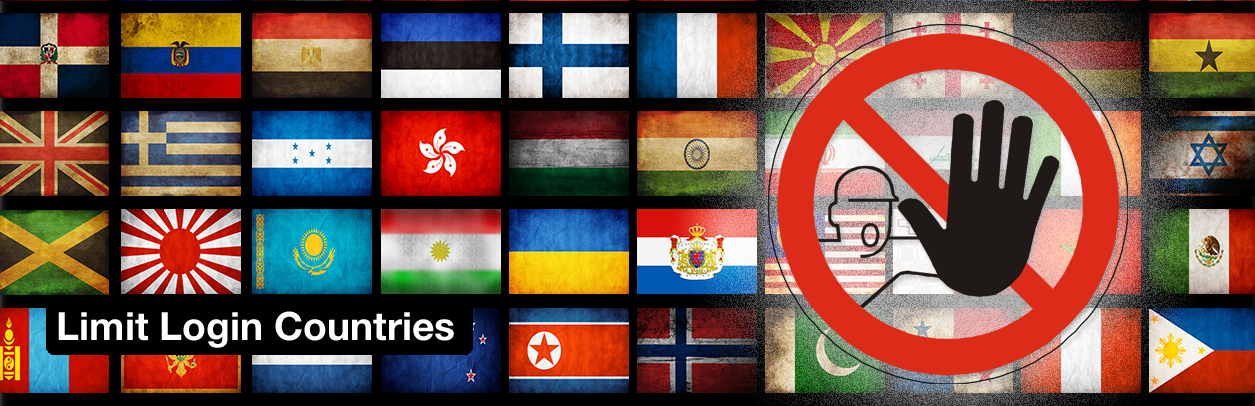
<style>
.page{position:relative;width:1255px;height:406px}
.page>*{position:absolute;margin:0}
.t1{font:39px "HelveticaNeue-Bold";color:#ffffff}
</style>
<div class="page">
<p class="t1" style="left:58px;top:311px;width:396px;height:37px">Limit Login Countries</p>
</div>
